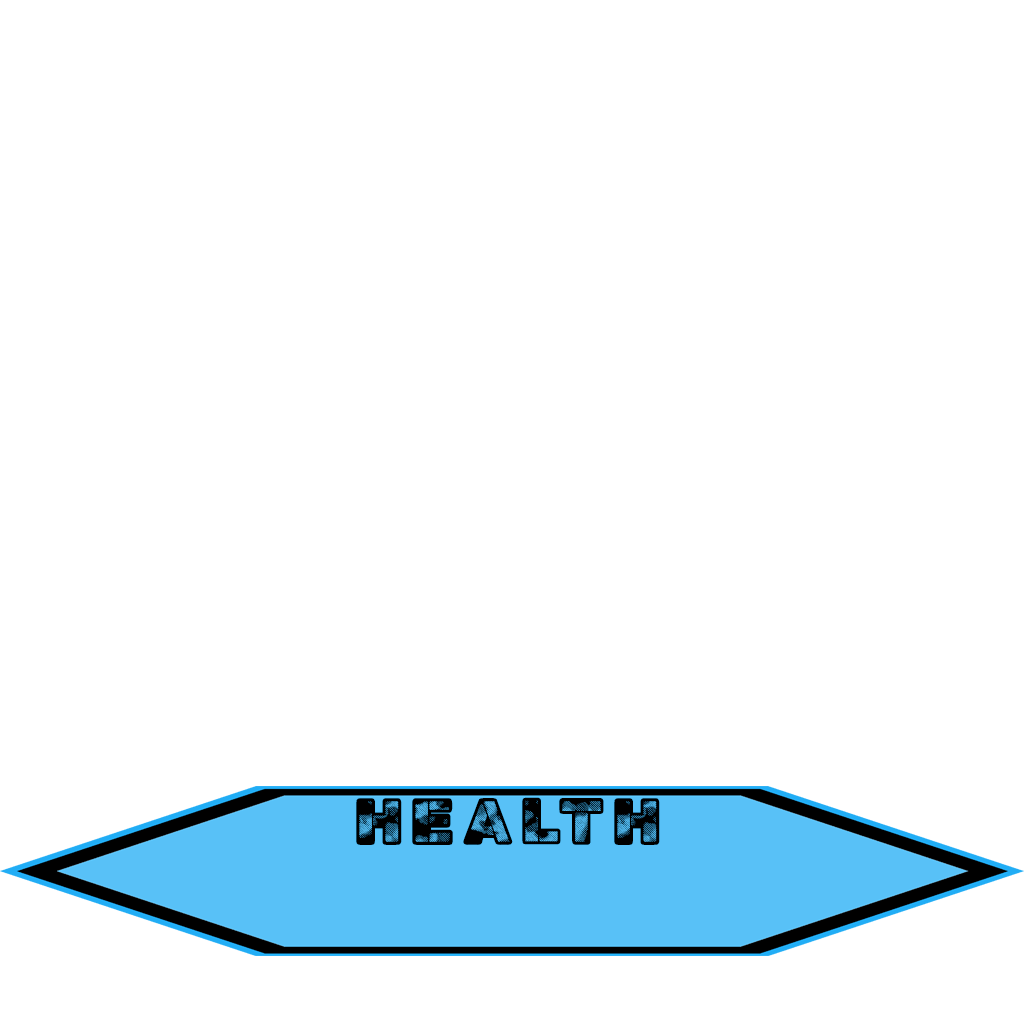
<style>
.page{position:relative;width:1024px;height:1024px;background:#ffffff}
.page>*{position:absolute;margin:0}
.t1{font:45.9px "Search'nDestroy";letter-spacing:0.16em;color:#000000}
</style>
<div class="page">
<p class="t1" style="left:356px;top:797px;width:304px;height:48px">HEALTH</p>
</div>
